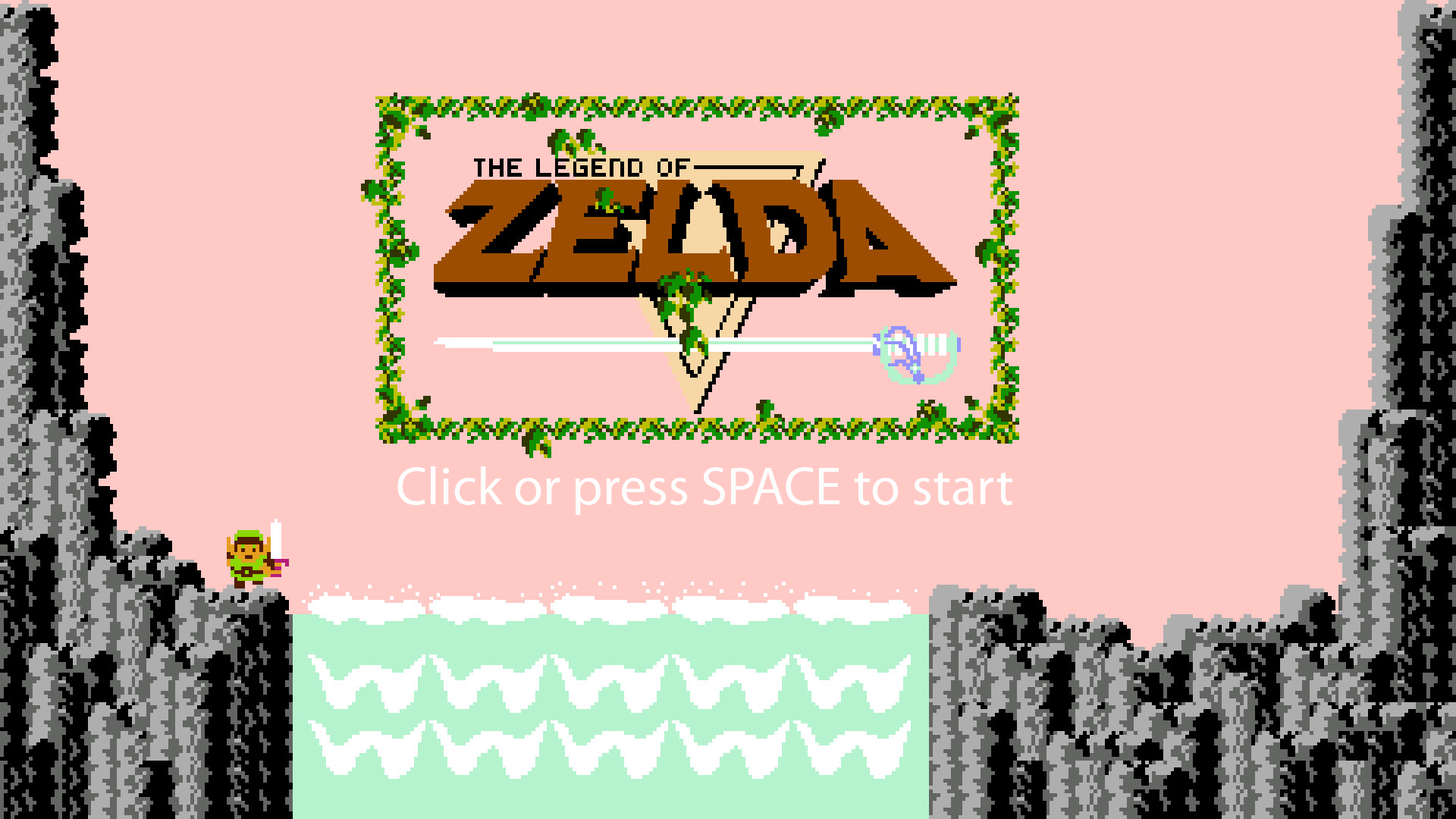
<style>
.page{position:relative;width:1456px;height:819px;background:#ffcac6}
.page>*{position:absolute;margin:0}
.t1{font:53.9px "MyriadPro-Regular";color:#fdfdfd}
</style>
<div class="page">
<p class="t1" style="left:397px;top:466px;width:615px;height:49px">Click or press SPACE to start</p>
</div>
